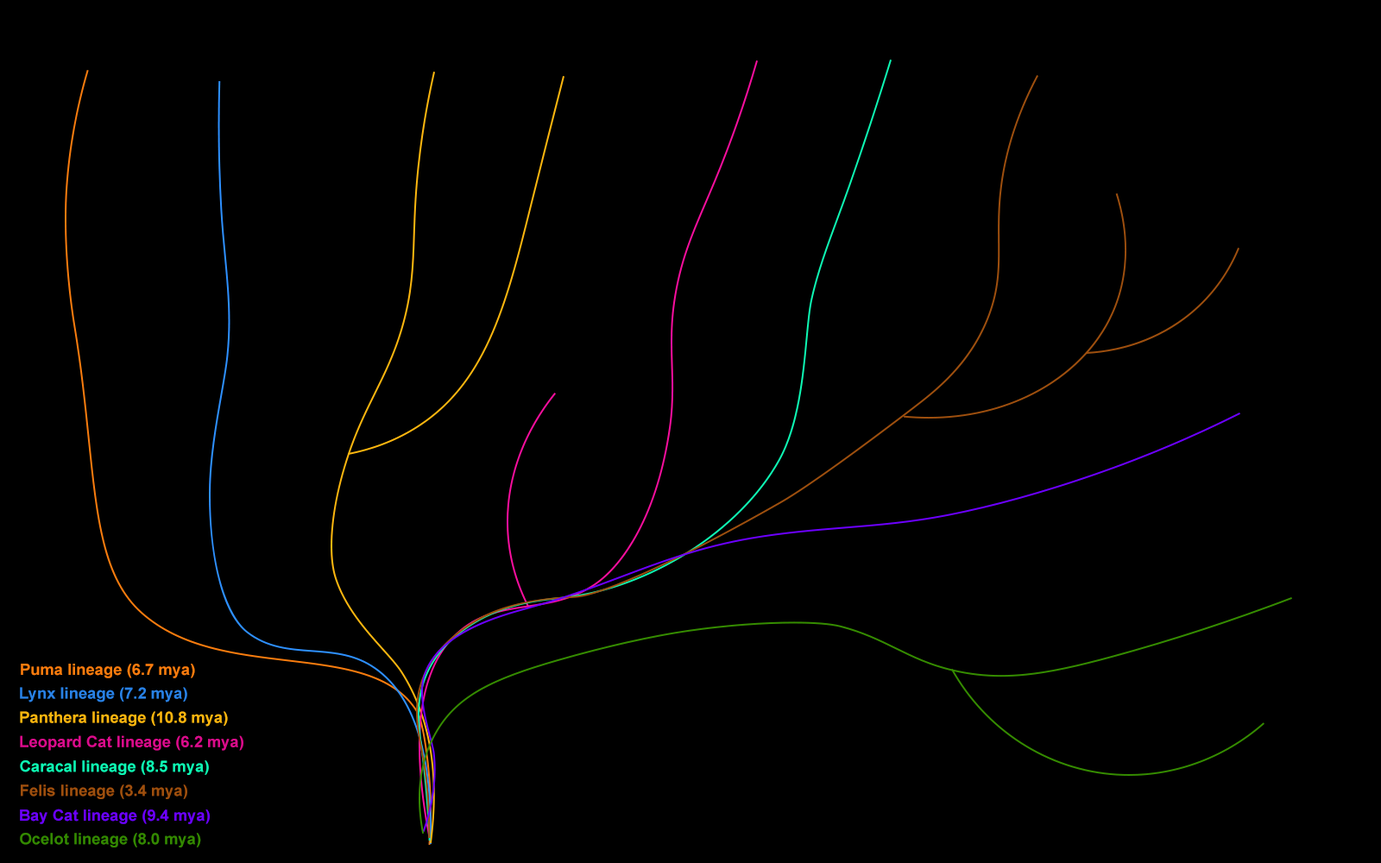
<style>
.page{position:relative;width:1381px;height:863px;background:#000000}
.page>*{position:absolute;margin:0}
.t1{font:15.5px "Arial-BoldMT";color:#f97c0e}
.t2{font:15.5px "Arial-BoldMT";color:#2981e4}
.t3{font:15.5px "Arial-BoldMT";color:#fab50f}
.t4{font:15.5px "Arial-BoldMT";color:#da0c8b}
.t5{font:15.5px "Arial-BoldMT";color:#0ef9b4}
.t6{font:15.5px "Arial-BoldMT";color:#9e4f0e}
.t7{font:15.5px "Arial-BoldMT";color:#6c00ff}
.t8{font:15.5px "Arial-BoldMT";color:#348900}
</style>
<div class="page">
<p class="t1" style="left:21px;top:664px;width:174px;height:15px">Puma lineage (6.7 mya)</p>
<p class="t2" style="left:20px;top:687px;width:167px;height:16px">Lynx lineage (7.2 mya)</p>
<p class="t3" style="left:20px;top:711px;width:208px;height:16px">Panthera lineage (10.8 mya)</p>
<p class="t4" style="left:20px;top:736px;width:223px;height:15px">Leopard Cat lineage (6.2 mya)</p>
<p class="t5" style="left:20px;top:761px;width:189px;height:14px">Caracal lineage (8.5 mya)</p>
<p class="t6" style="left:21px;top:785px;width:166px;height:14px">Felis lineage (3.4 mya)</p>
<p class="t7" style="left:20px;top:809px;width:190px;height:15px">Bay Cat lineage (9.4 mya)</p>
<p class="t8" style="left:20px;top:833px;width:181px;height:15px">Ocelot lineage (8.0 mya)</p>
</div>
